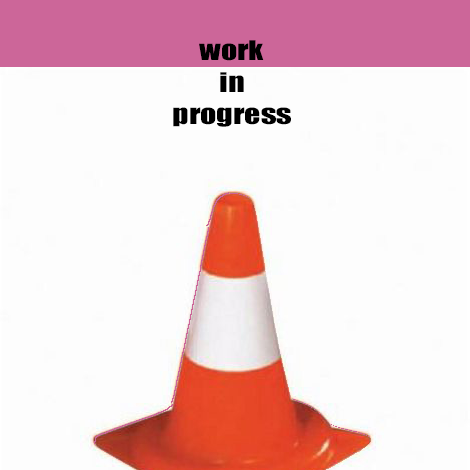
<style>
.page{position:relative;width:470px;height:470px;background:#fdfdfd}
.page>*{position:absolute;margin:0}
.t1{font:25px/8px "Impact";color:#000000;scale:1.28 1}
</style>
<div class="page">
<p class="t1" style="left:173px;top:40px;width:118px;height:87px;text-align:center">work<br><br><br><br>in<br><br><br><br>progress</p>
</div>
